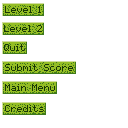
<style>
.page{position:relative;width:128px;height:128px;background:#ffffff}
.page>*{position:absolute;margin:0}
.t1{font:8px "pixelmix";color:#183705}
</style>
<div class="page">
<p class="t1" style="left:5px;top:6px;width:36px;height:7px">Level 1</p>
<p class="t1" style="left:4px;top:25px;width:38px;height:7px">Level 2</p>
<p class="t1" style="left:4px;top:44px;width:21px;height:7px">Quit</p>
<p class="t1" style="left:5px;top:64px;width:68px;height:7px">Submit Score</p>
<p class="t1" style="left:5px;top:84px;width:50px;height:7px">Main Menu</p>
<p class="t1" style="left:5px;top:105px;width:39px;height:7px">Credits</p>
</div>
